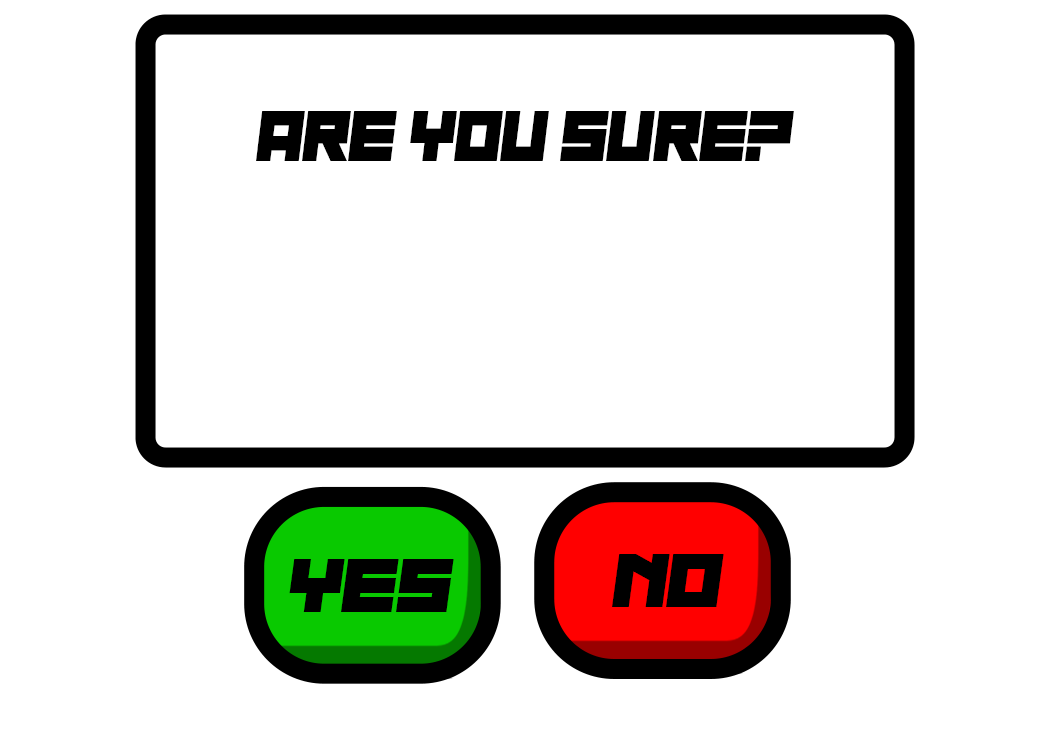
<style>
.page{position:relative;width:1050px;height:750px;background:#ffffff}
.page>*{position:absolute;margin:0}
.t1{font:72.6px "NauSea";color:#000000}
.t2{font:77.4px "NauSea";color:#000000;scale:1.11 1}
</style>
<div class="page">
<p class="t1" style="left:256px;top:111px;width:538px;height:50px">are you sure?</p>
<p class="t2" style="left:612px;top:554px;width:112px;height:53px">no</p>
<p class="t2" style="left:289px;top:559px;width:165px;height:53px">yes</p>
</div>
